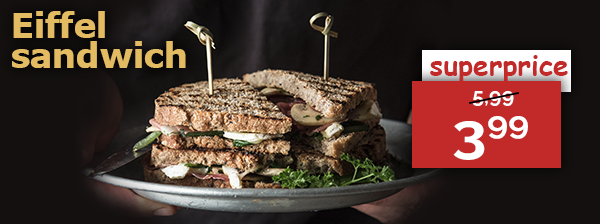
<style>
.page{position:relative;width:600px;height:224px;background:#141010}
.page>*{position:absolute;margin:0}
.t1{font:35px/30px "Tahoma-Bold";color:#e3bb63;scale:1.06 1}
.t2{font:27.9px "ComicSansMS-Bold";color:#c12a29}
.t3{font:21.4px "Raleway-Bold";color:#ffffff}
.t4{font:54.1px "Raleway-Bold";color:#ffffff;scale:1.14 1}
</style>
<div class="page">
<p class="t1" style="left:12px;top:11px;width:174px;height:57px">Eiffel <br>sandwich</p>
<p class="t2" style="left:430px;top:55px;width:138px;height:28px">superprice</p>
<p class="t3" style="left:472px;top:91px;width:42px;height:15px">5,99</p>
<p class="t4" style="left:453px;top:116px;width:75px;height:44px">399</p>
</div>
